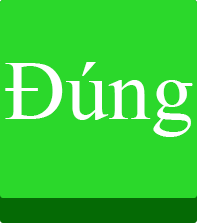
<style>
.page{position:relative;width:197px;height:223px;background:#2bd82b}
.page>*{position:absolute;margin:0}
.t1{font:85px "TimesNewRomanPSMT";color:#ffffff}
</style>
<div class="page">
<p class="t1" style="left:5px;top:62px;width:188px;height:75px">Đúng</p>
</div>
